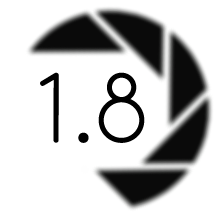
<style>
.page{position:relative;width:220px;height:220px;background:#ffffff}
.page>*{position:absolute;margin:0}
.t1{font:100px "Quicksand-Regular";color:#000000}
</style>
<div class="page">
<p class="t1" style="left:40px;top:72px;width:105px;height:71px">1.8</p>
</div>
